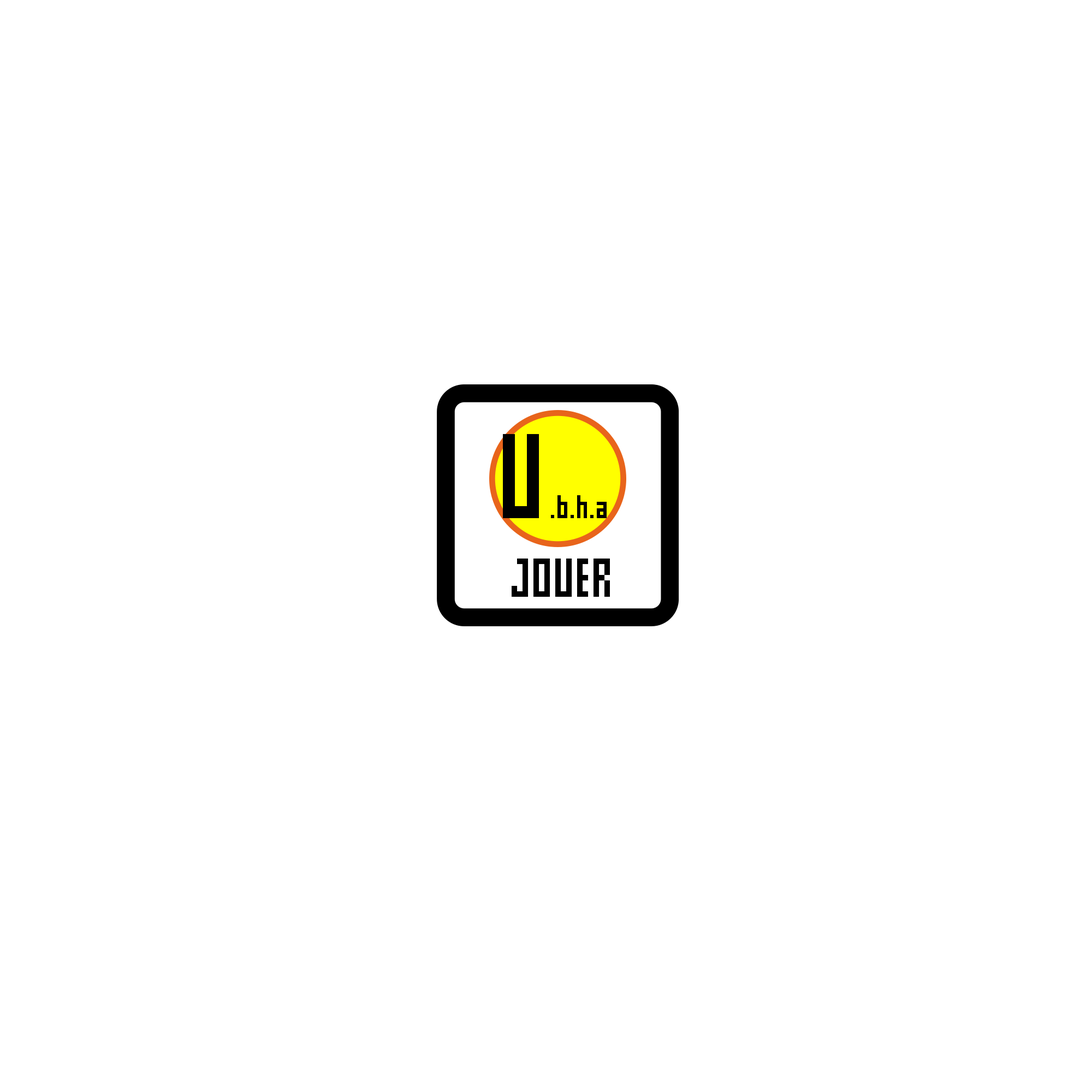
<style>
.page{position:relative;width:1092px;height:1092px;background:#ffffff}
.page>*{position:absolute;margin:0}
.t1{font:32.8px "pxl";color:#000000}
.t2{font:120.1px "pxl";color:#000000}
.t3{font:54.6px "pxl";color:#000000}
</style>
<div class="page">
<p class="t1" style="left:503px;top:434px;width:104px;height:84px"><span class="t2">U</span>.b.h.a</p>
<p class="t3" style="left:512px;top:558px;width:98px;height:39px">JOUER</p>
</div>
